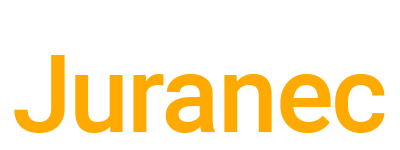
<style>
.page{position:relative;width:400px;height:150px;background:#ffffff}
.page>*{position:absolute;margin:0}
.t1{font:108px "Roboto-Medium";letter-spacing:-0.02em;color:#ffaa00}
</style>
<div class="page">
<p class="t1" style="left:14px;top:55px;width:371px;height:78px">Juranec</p>
</div>
